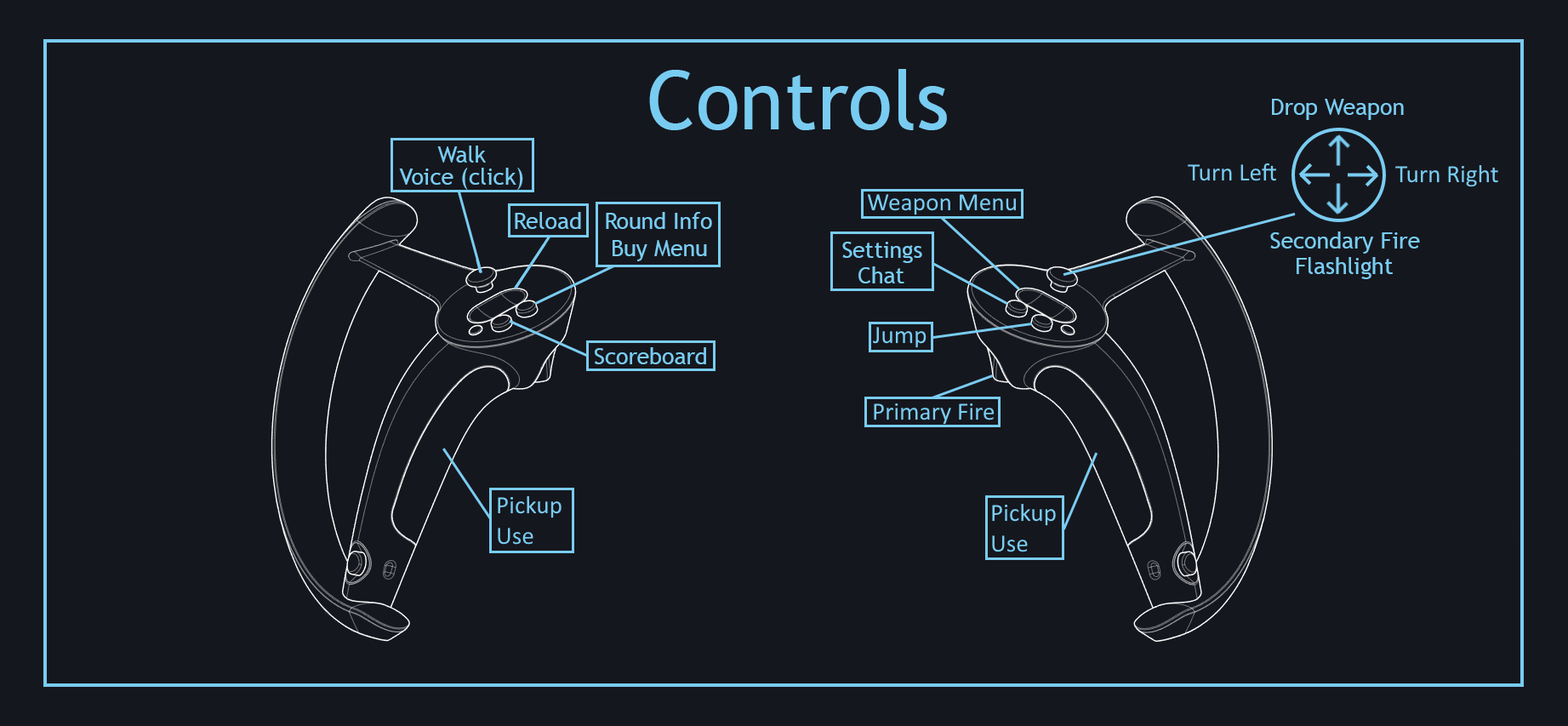
<style>
.page{position:relative;width:1568px;height:726px;background:#15171e}
.page>*{position:absolute;margin:0}
.t1{font:81.7px "TrebuchetMS";color:#79ccf1}
.t2{font:22.7px "TrebuchetMS";color:#79ccf1}
</style>
<div class="page">
<p class="t1" style="left:649px;top:69px;width:298px;height:61px">Controls</p>
<p class="t2" style="left:1272px;top:99px;width:132px;height:21px">Drop Weapon</p>
<p class="t2" style="left:437px;top:145px;width:49px;height:18px">Walk</p>
<p class="t2" style="left:399px;top:168px;width:124px;height:22px">Voice (click)</p>
<p class="t2" style="left:515px;top:212px;width:66px;height:17px">Reload</p>
<p class="t2" style="left:606px;top:212px;width:106px;height:17px">Round Info</p>
<p class="t2" style="left:1270px;top:231px;width:150px;height:23px">Secondary Fire</p>
<p class="t2" style="left:613px;top:240px;width:94px;height:21px">Buy Menu</p>
<p class="t2" style="left:842px;top:242px;width:80px;height:21px">Settings</p>
<p class="t2" style="left:1297px;top:257px;width:96px;height:22px">Flashlight</p>
<p class="t2" style="left:858px;top:266px;width:46px;height:17px">Chat</p>
<p class="t2" style="left:595px;top:347px;width:111px;height:17px">Scoreboard</p>
</div>
